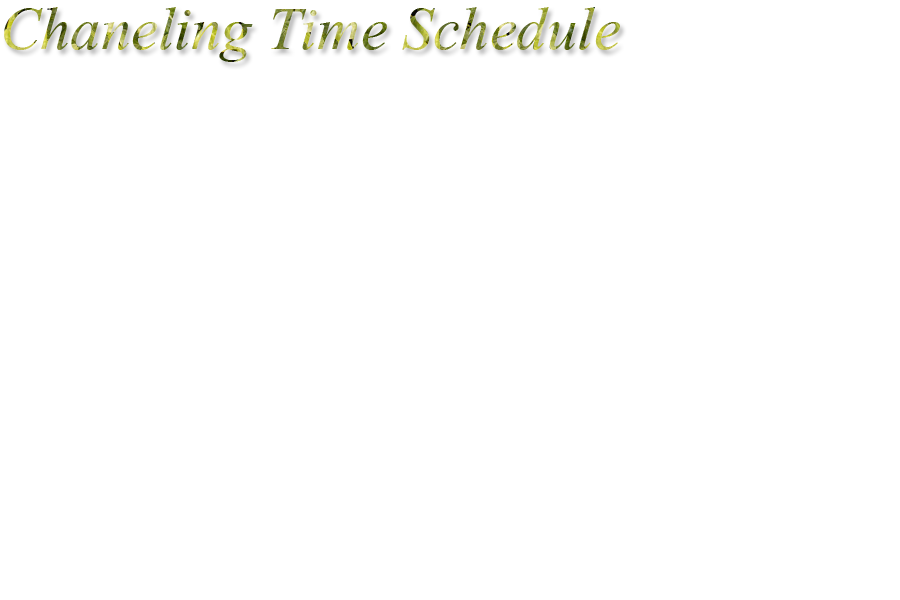
<style>
.page{position:relative;width:900px;height:600px;background:#ffffff}
.page>*{position:absolute;margin:0}
.t1{font:75px "Vijaya"}
</style>
<div class="page">
<p class="t1" style="left:4px;top:7px;width:616px;height:55px">Chaneling Time Schedule</p>
</div>
